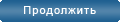
<style>
.page{position:relative;width:120px;height:22px}
.page>*{position:absolute;margin:0}
.t1{font:11px "ArialMT";letter-spacing:0.099em;color:#ffffff}
</style>
<div class="page">
<p class="t1" style="left:24px;top:6px;width:72px;height:10px">Продолжить</p>
</div>
